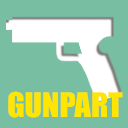
<style>
.page{position:relative;width:128px;height:128px;background:#78bea2}
.page>*{position:absolute;margin:0}
.t1{font:31.2px "Impact";color:#ffe500}
</style>
<div class="page">
<p class="t1" style="left:8px;top:91px;width:115px;height:27px">GUNPART</p>
</div>
